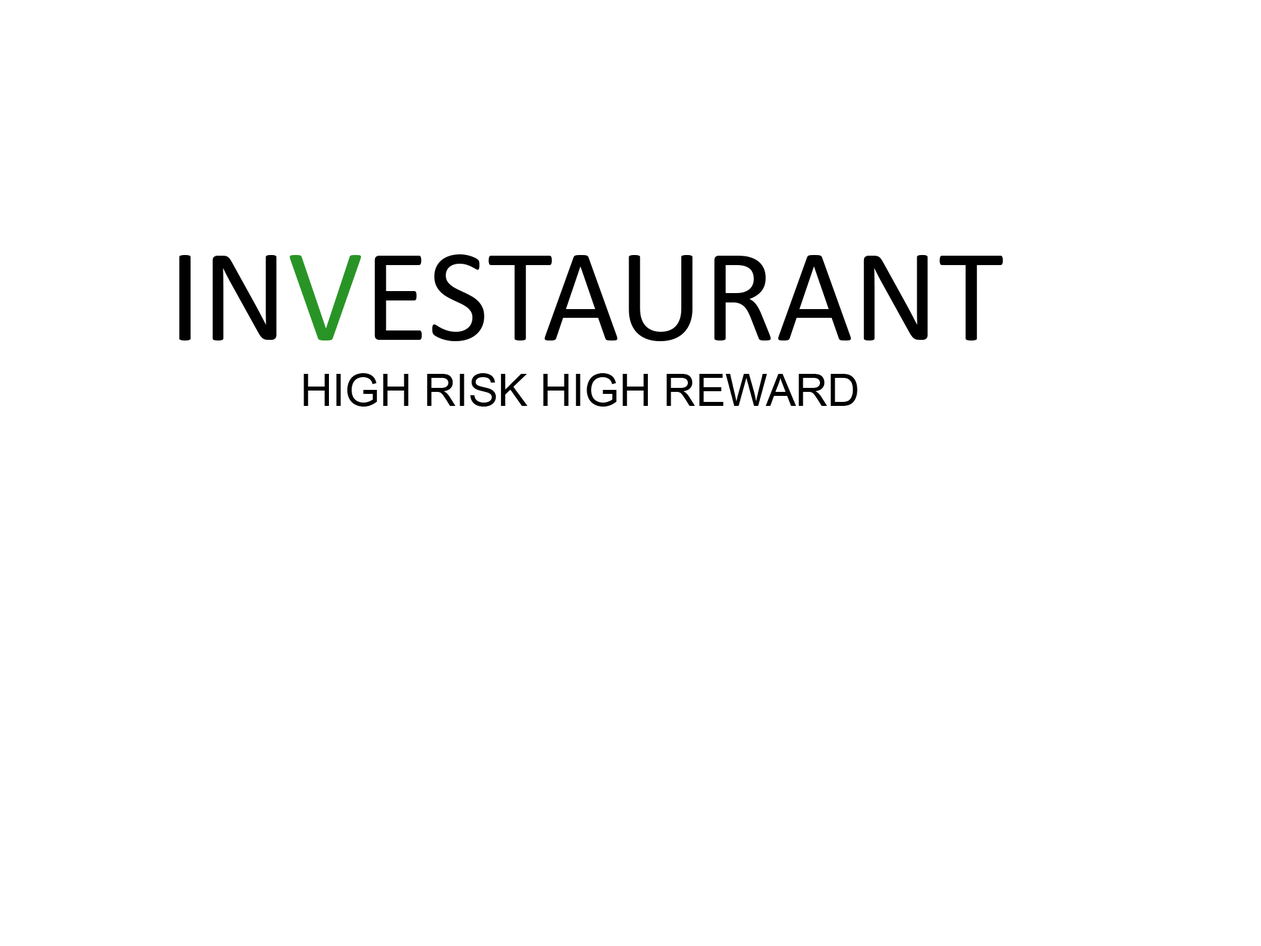
<style>
.page{position:relative;width:1261px;height:946px;background:#ffffff}
.page>*{position:absolute;margin:0}
.t1{font:133.5px "Calibri";color:#000000}
.t2{font:133.5px "Calibri";color:#299426}
.t3{font:44.5px "ArialMT";color:#000000}
</style>
<div class="page">
<p class="t1" style="left:179px;top:254px;width:824px;height:87px">IN<span class="t2">V</span>ESTAURANT</p>
<p class="t3" style="left:304px;top:373px;width:553px;height:33px">HIGH RISK HIGH REWARD</p>
</div>
